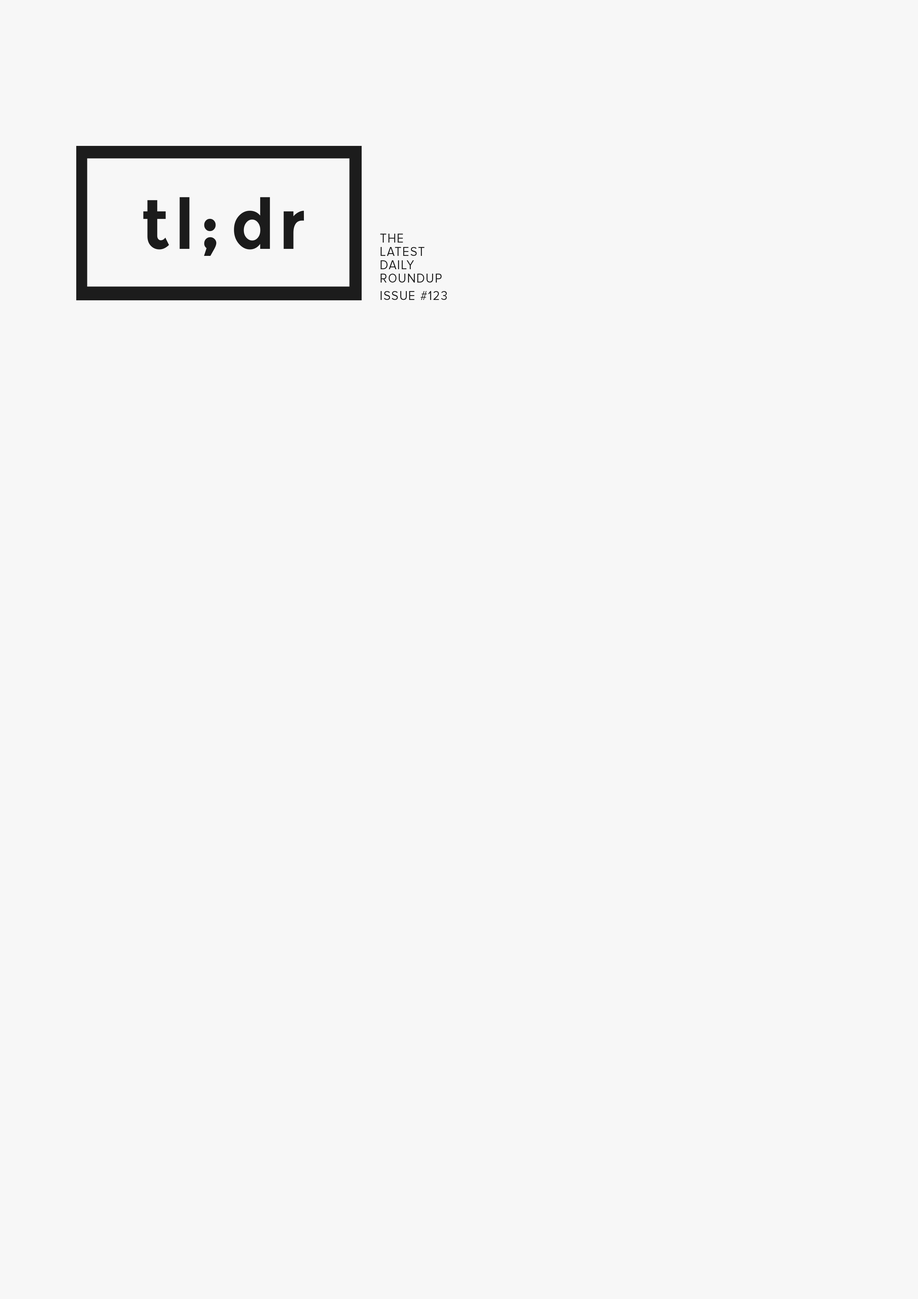
<style>
.page{position:relative;width:918px;height:1299px;background:#f7f7f7}
.page>*{position:absolute;margin:0}
.t1{font:12.9px/13.3px "ProximaNova-Regular";letter-spacing:0.07em;color:#1b1b1b;text-transform:uppercase;scale:0.93 1}
.t2{font:12.9px/17.2px "ProximaNova-Regular";letter-spacing:0.07em;color:#1b1b1b;text-transform:uppercase;scale:0.93 1}
</style>
<div class="page">
<p class="t1" style="left:380px;top:234px;width:67px;height:66px">The<br>LATEST<br>DAILY<br>ROUNDUP<br><br><br><span class="t2">ISSUE #123</span></p>
</div>
